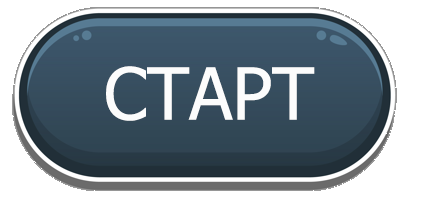
<style>
.page{position:relative;width:421px;height:200px;background:#ffffff}
.page>*{position:absolute;margin:0}
.t1{font:72px "Tahoma";color:#fcfcfc}
</style>
<div class="page">
<p class="t1" style="left:106px;top:66px;width:209px;height:55px">СТАРТ</p>
</div>
